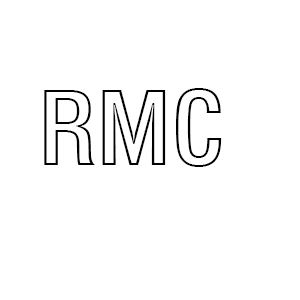
<style>
.page{position:relative;width:300px;height:300px;background:#ffffff}
.page>*{position:absolute;margin:0}
.t1{font:100px "Swiss721BT-BoldCondensedOutline";color:#000000}
</style>
<div class="page">
<p class="t1" style="left:44px;top:88px;width:178px;height:79px">RMC</p>
</div>
